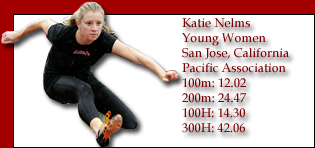
<style>
.page{position:relative;width:315px;height:148px;background:#ffffff}
.page>*{position:absolute;margin:0}
.t1{font:12.5px "BookAntiqua";color:#7b0002}
</style>
<div class="page">
<p class="t1" style="left:182px;top:18px;width:107px;height:115px">Katie Nelms<br>Young Women<br>San Jose, California<br>Pacific Association<br>100m: 12.02<br>200m: 24.47<br>100H: 14.30<br>300H: 42.06</p>
</div>
